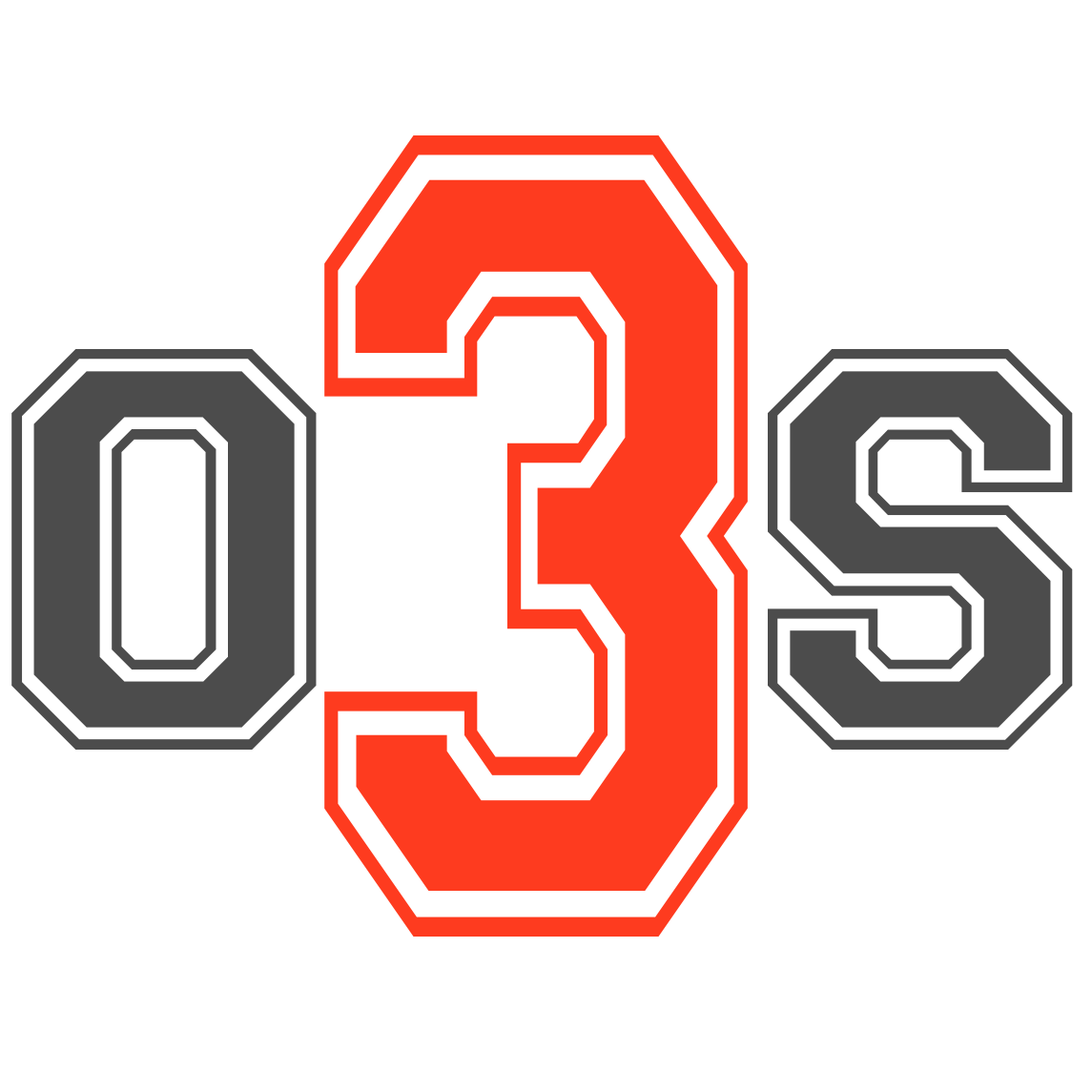
<style>
.page{position:relative;width:1092px;height:1092px;background:#ffffff}
.page>*{position:absolute;margin:0}
.t1{font:1144.4px "Varsity-Regular";letter-spacing:0.06em;color:#fe3b1f;scale:0.69 1}
.t2{font:572.2px "Varsity-Regular";letter-spacing:0.06em;color:#4c4c4c}
</style>
<div class="page">
<p class="t1" style="left:324px;top:135px;width:424px;height:802px">3</p>
<p class="t2" style="left:11px;top:349px;width:306px;height:401px">O</p>
<p class="t2" style="left:768px;top:349px;width:305px;height:401px">S</p>
</div>
